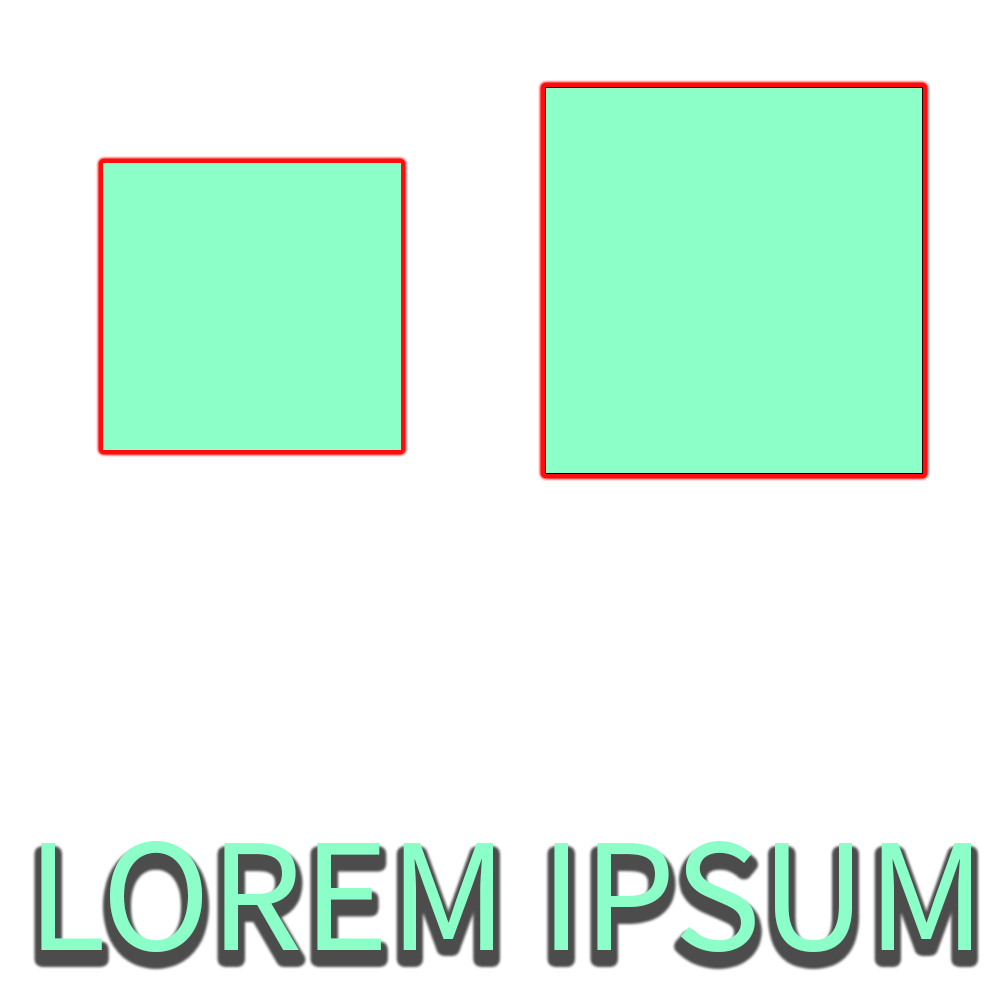
<style>
.page{position:relative;width:1000px;height:1000px;background:#ffffff}
.page>*{position:absolute;margin:0}
.t1{font:146.1px "NotoSansKR-Regular";color:#8cffc8;text-transform:uppercase}
</style>
<div class="page">
<p class="t1" style="left:41px;top:841px;width:930px;height:111px">Lorem Ipsum</p>
</div>
